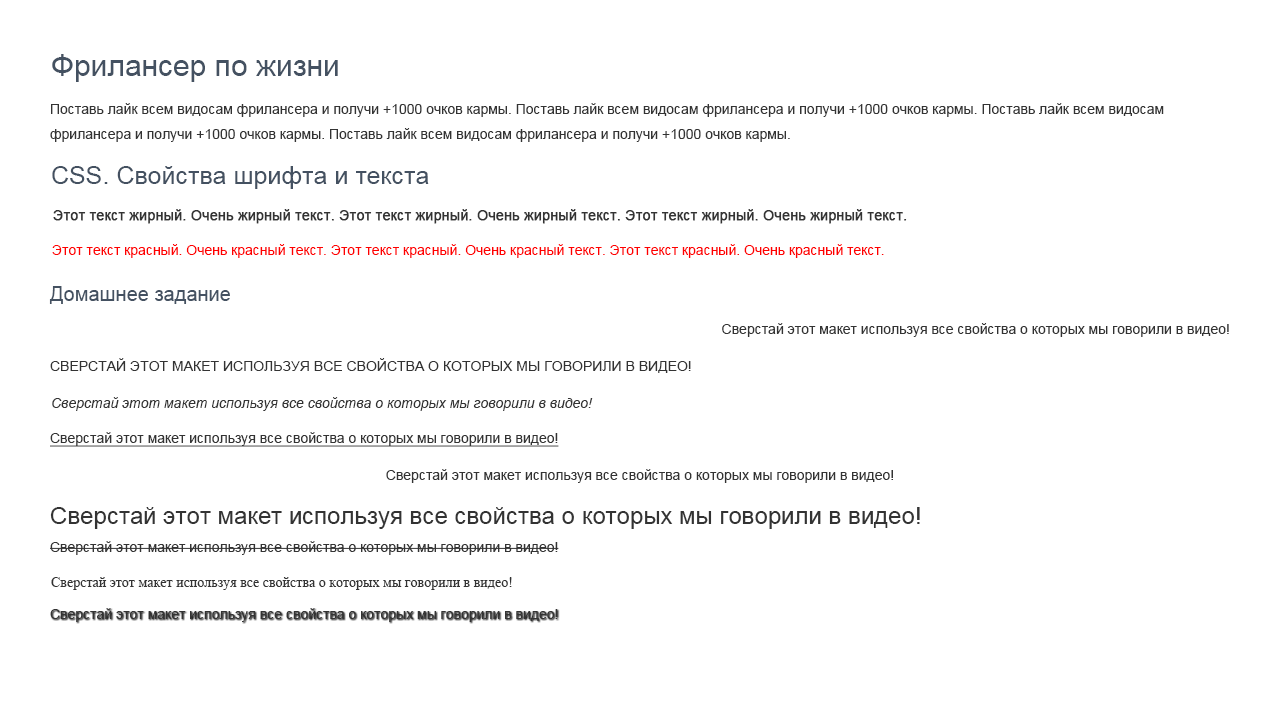
<style>
.page{position:relative;width:1280px;height:717px;background:#ffffff}
.page>*{position:absolute;margin:0}
.t1{font:30px "ArialMT";color:#445161}
.t2{font:14px/25px "ArialMT";color:#333333}
.t3{font:25px "ArialMT";color:#445161}
.t4{font:14px "ArialMT";color:#333333;font-weight:bold}
.t5{font:14px "ArialMT";color:#ff0000}
.t6{font:20px "ArialMT";color:#445161}
.t7{font:14px "ArialMT";color:#333333}
.t8{font:14px "ArialMT";color:#333333;text-transform:uppercase}
.t9{font:14px "Arial-ItalicMT";color:#333333}
.t10{font:14px "ArialMT";color:#333333;text-decoration:underline}
.t11{font:24px "ArialMT";color:#333333}
.t12{font:14px "TimesNewRomanPSMT";color:#333333}
</style>
<div class="page">
<p class="t1" style="left:52px;top:54px;width:286px;height:28px">Фрилансер по жизни</p>
<p class="t2" style="left:50px;top:103px;width:1114px;height:39px">Поставь лайк всем видосам фрилансера и получи +1000 очков кармы. Поставь лайк всем видосам фрилансера и получи +1000 очков кармы. Поставь лайк всем видосам фрилансера и получи +1000 очков кармы. Поставь лайк всем видосам фрилансера и получи +1000 очков кармы.</p>
<p class="t3" style="left:52px;top:166px;width:377px;height:23px">CSS. Свойства шрифта и текста</p>
<p class="t4" style="left:53px;top:209px;width:854px;height:15px">Этот текст жирный. Очень жирный текст. Этот текст жирный. Очень жирный текст. Этот текст жирный. Очень жирный текст.</p>
<p class="t5" style="left:52px;top:244px;width:832px;height:14px">Этот текст красный. Очень красный текст. Этот текст красный. Очень красный текст. Этот текст красный. Очень красный текст.</p>
<p class="t6" style="left:49px;top:286px;width:181px;height:18px">Домашнее задание</p>
<p class="t7" style="left:722px;top:323px;width:507px;height:14px">Сверстай этот макет используя все свойства о которых мы говорили в видео!</p>
<p class="t8" style="left:50px;top:358px;width:641px;height:15px">Сверстай этот макет используя все свойства о которых мы говорили в видео!</p>
<p class="t9" style="left:52px;top:397px;width:541px;height:14px">Сверстай этот макет используя все свойства о которых мы говорили в видео!</p>
<p class="t10" style="left:50px;top:432px;width:509px;height:15px">Сверстай этот макет используя все свойства о которых мы говорили в видео!</p>
<p class="t7" style="left:386px;top:469px;width:507px;height:14px">Сверстай этот макет используя все свойства о которых мы говорили в видео!</p>
<p class="t11" style="left:50px;top:507px;width:870px;height:22px">Сверстай этот макет используя все свойства о которых мы говорили в видео!</p>
<p class="t7" style="left:50px;top:541px;width:509px;height:14px">Сверстай этот макет используя все свойства о которых мы говорили в видео!</p>
<p class="t12" style="left:51px;top:577px;width:461px;height:13px">Сверстай этот макет используя все свойства о которых мы говорили в видео!</p>
<p class="t7" style="left:50px;top:608px;width:508px;height:14px">Сверстай этот макет используя все свойства о которых мы говорили в видео!</p>
</div>
